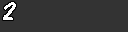
<style>
.page{position:relative;width:128px;height:32px;background:#333333}
.page>*{position:absolute;margin:0}
.t1{font:30px "DomDiagonalBT-Regular";color:#ffffff}
</style>
<div class="page">
<p class="t1" style="left:3px;top:2px;width:13px;height:18px">2</p>
</div>
